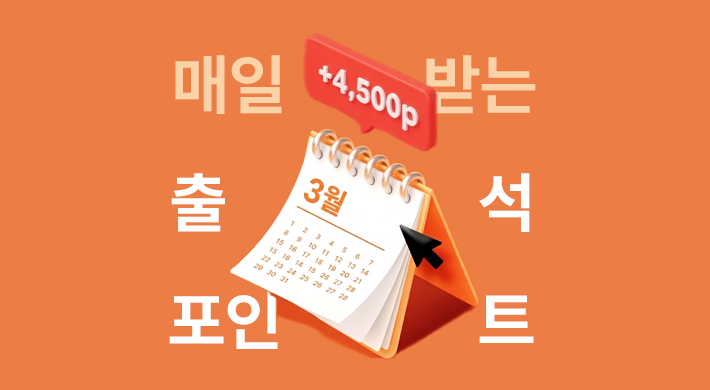
<style>
.page{position:relative;width:710px;height:390px;background:#ec7d45}
.page>*{position:absolute;margin:0}
.t1{font:66px "Pretendard-Bold";color:#fad3a8}
.t2{font:66px "Pretendard-Bold";color:#ffffff}
</style>
<div class="page">
<p class="t1" style="left:175px;top:55px;width:361px;height:59px">매일         받는</p>
<p class="t2" style="left:171px;top:173px;width:54px;height:59px">출</p>
<p class="t2" style="left:479px;top:173px;width:51px;height:59px">석</p>
<p class="t2" style="left:169px;top:291px;width:109px;height:58px">포인</p>
<p class="t2" style="left:479px;top:295px;width:55px;height:48px">트</p>
</div>
